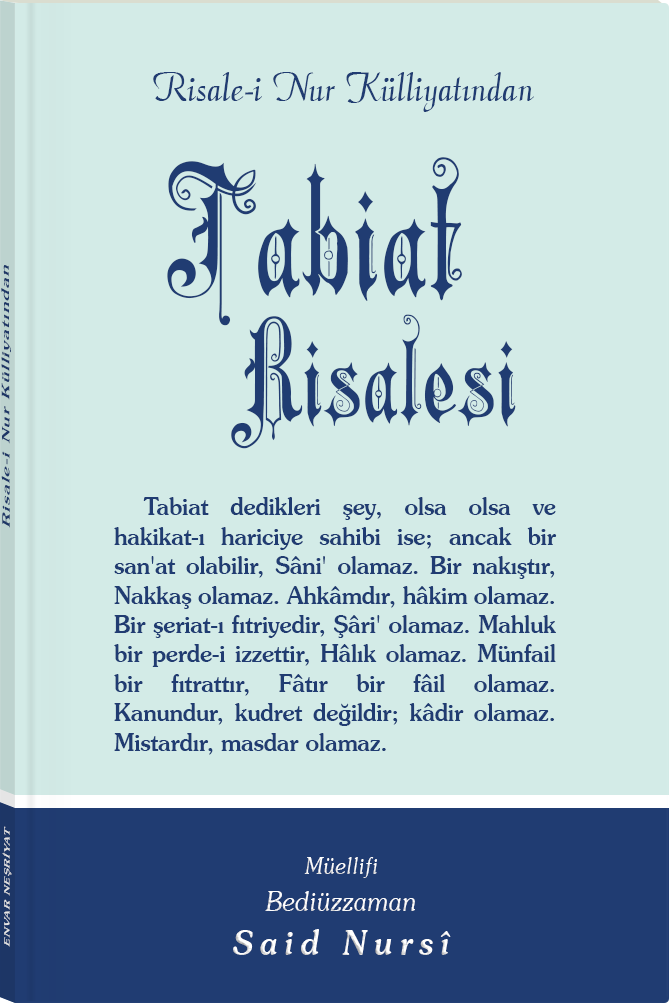
<style>
.page{position:relative;width:669px;height:1003px;background:#d3ebe7}
.page>*{position:absolute;margin:0}
.t1{font:45.3px "Barla © 072 Aria ScriptScriptSSi";color:#203c72;scale:0.94 1}
.t2{font:135.7px/126.7px "Barla © 001 Liva Nur";letter-spacing:-0.001em;color:#203c72;scale:0.92 1}
.t3{font:175.4px/156.5px "Barla © 001 Liva Nur";letter-spacing:-0.001em;color:#203c72;scale:0.92 1}
.t4{font:11.4px "Souvenir-Medium";letter-spacing:0.08em;color:#203c72;scale:1.65 1}
.t5{font:24.5px/29.4px "Souvenir-Medium";color:#203c72;scale:0.92 1}
.t6{font:8.3px "Souvenir-Medium";letter-spacing:0.08em;color:#e5e5e5;scale:1.43 1}
.t7{font:27.1px/37.8px "Souvenir-LightItalic";color:#ffffff;scale:0.92 1}
.t8{font:22.8px/39.8px "Souvenir-LightItalic";color:#ffffff;scale:0.92 1}
.t9{font:33.9px/43.8px "Souvenir-MediumItalic";letter-spacing:0.2em;color:#ffffff;scale:0.92 1}
</style>
<div class="page">
<p class="t1" style="left:153px;top:72px;width:381px;height:40px">Risale-i Nur Külliyatından</p>
<p class="t2" style="left:167px;top:157px;width:349px;height:292px;text-align:center"><span class="t3">Tabiat<br></span>     Risalesi</p>
<p class="t4" style="left:1px;top:265px;width:10px;height:263px;rotate:-90deg">Risale-i Nur Külliyatından</p>
<p class="t5" style="left:114px;top:497px;width:443px;height:258px;text-align:justify">Tabiat dedikleri şey, olsa olsa ve hakikat-ı hariciye sahibi ise; ancak bir san'at olabilir, Sâni' olamaz. Bir nakıştır, Nakkaş olamaz. Ahkâmdır, hâkim olamaz. Bir şeriat-ı fıtriyedir, Şâri' olamaz. Mahluk bir perde-i izzettir, Hâlık olamaz. Münfail bir fıtrattır, Fâtır bir fâil olamaz. Kanundur, kudret değildir; kâdir olamaz. Mistardır, masdar olamaz.</p>
<p class="t6" style="left:2px;top:826px;width:10px;height:121px;rotate:-90deg">ENVAR NEŞRİYAT</p>
<p class="t7" style="left:233px;top:857px;width:218px;height:98px;text-align:center"><span class="t8">Müellifi<br></span>Bediüzzaman<br><span class="t9">Said Nursî</span></p>
</div>
